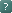
<style>
.page{position:relative;width:12px;height:13px}
.page>*{position:absolute;margin:0}
.t1{font:10px "Tahoma";letter-spacing:0.02em;color:#ffffff;font-variant:small-caps}
</style>
<div class="page">
<p class="t1" style="left:4px;top:3px;width:4px;height:7px">?</p>
</div>
